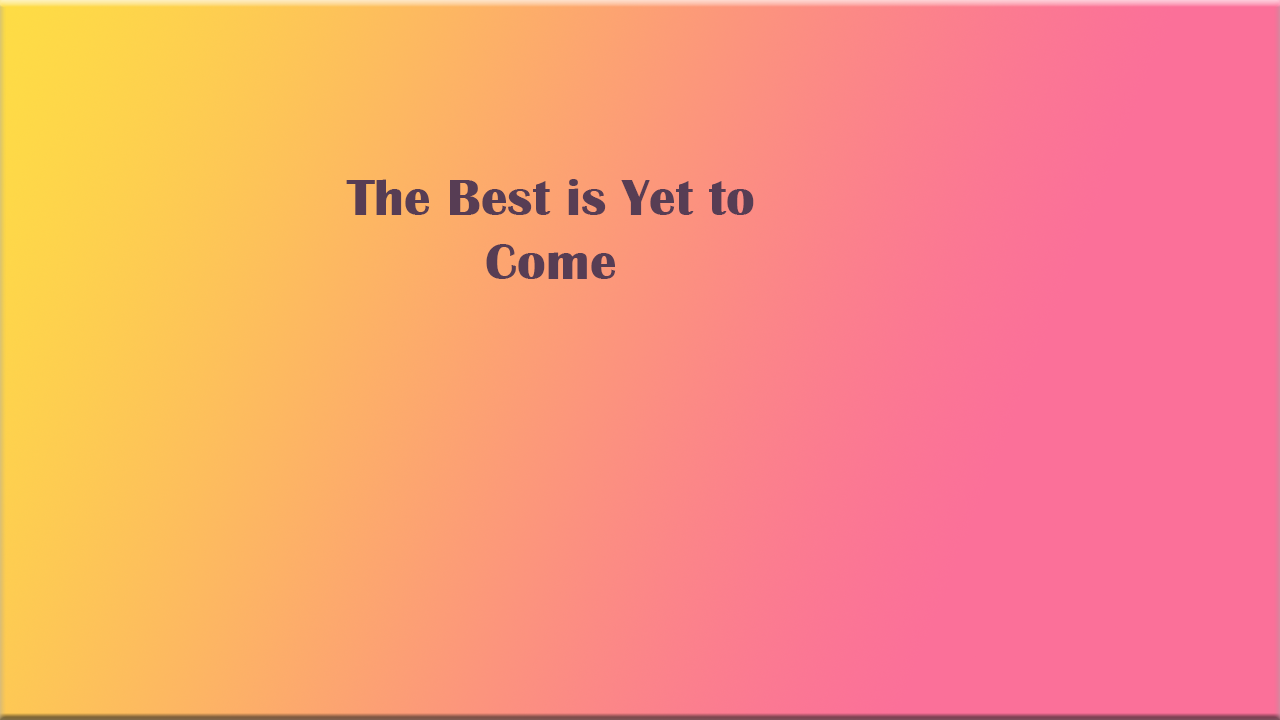
<style>
.page{position:relative;width:1280px;height:720px}
.page>*{position:absolute;margin:0}
.t1{font:53.3px "BritannicBold";color:#573d54}
</style>
<div class="page">
<p class="t1" style="left:346px;top:179px;width:408px;height:100px;text-align:center">The Best is Yet to Come</p>
</div>
